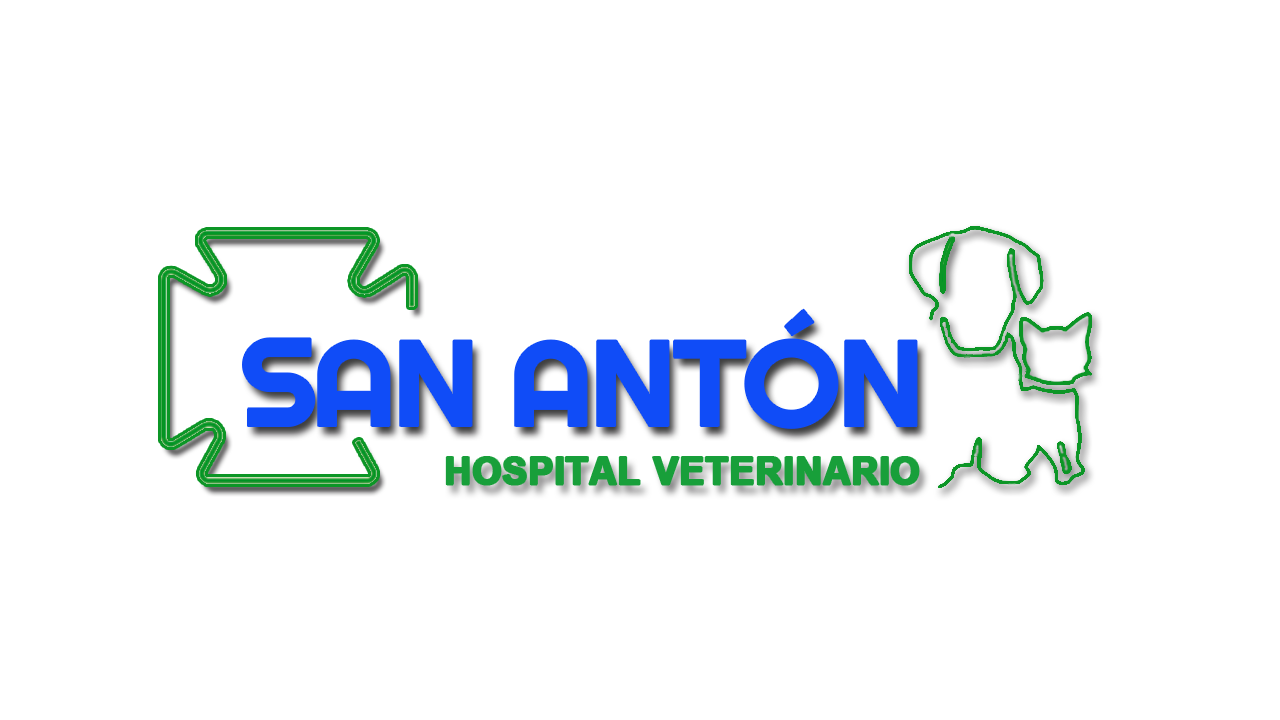
<style>
.page{position:relative;width:1280px;height:720px;background:#ffffff}
.page>*{position:absolute;margin:0}
.t1{font:121.7px "Righteous-Regular";letter-spacing:-0.03em;color:#104cf7;scale:1.04 1}
.t2{font:125px "Righteous-Regular";letter-spacing:-0.05em;color:#104cf7}
.t3{font:64.2px "Arial-BoldMT";letter-spacing:0.01em;color:#189f3a;font-weight:bold}
</style>
<div class="page">
<p class="t1" style="left:243px;top:309px;width:674px;height:119px"><span class="t2">S</span>AN ANTÓN</p>
<p class="t3" style="left:446px;top:457px;width:473px;height:28px">HOSPITAL VETERINARIO</p>
</div>
